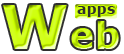
<style>
.page{position:relative;width:124px;height:54px;background:#ffffff}
.page>*{position:absolute;margin:0}
.t1{font:36px "Verdana-Bold";letter-spacing:0.025em}
.t2{font:60px "Verdana-Bold";letter-spacing:0.025em}
.t3{font:14px "Verdana-Bold";letter-spacing:0.025em;color:#303030}
</style>
<div class="page">
<p class="t1" style="left:3px;top:5px;width:116px;height:44px"><span class="t2">W</span>eb</p>
<p class="t3" style="left:77px;top:6px;width:38px;height:11px">apps</p>
</div>
